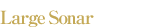
<style>
.page{position:relative;width:156px;height:27px;background:#ffffff}
.page>*{position:absolute;margin:0}
.t1{font:18px "RyuminPro-ExBold";letter-spacing:-0.08em;color:#c4a956}
</style>
<div class="page">
<p class="t1" style="left:0px;top:10px;width:94px;height:17px">Large Sonar</p>
</div>
